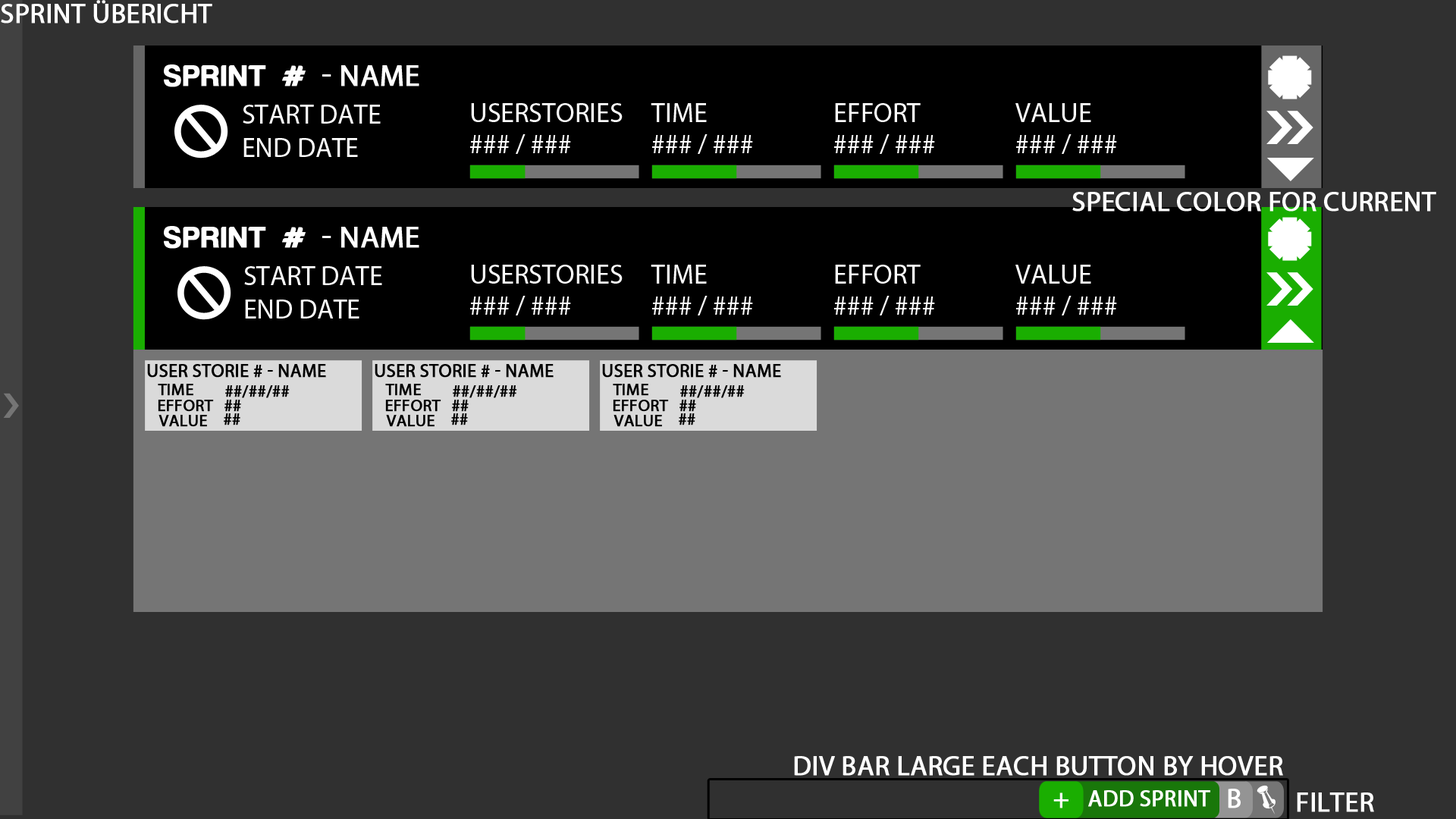
<style>
.page{position:relative;width:1456px;height:819px;background:#303030}
.page>*{position:absolute;margin:0}
.t1{font:27.3px "MyriadPro-Regular";color:#ffffff;text-transform:uppercase;font-weight:bold}
.t2{font:30.3px "HarabaraMaisBold-HarabaraMaisBold";color:#ffffff;text-transform:uppercase;font-weight:bold}
.t3{font:30.3px "MyriadPro-Regular";color:#ffffff;text-transform:uppercase;font-weight:bold}
.t4{font:27.3px/24.8px "MyriadPro-Regular";color:#ffffff;text-transform:uppercase}
.t5{font:27.3px "MyriadPro-Regular";color:#ffffff;text-transform:uppercase}
.t6{font:18.2px "MyriadPro-Regular";color:#000000;text-transform:uppercase;font-weight:bold}
.t7{font:16.7px "MyriadPro-Regular";color:#000000;text-transform:uppercase;font-weight:bold}
.t8{font:22.7px "MyriadPro-Regular";color:#ffffff;text-transform:uppercase;font-weight:bold}
</style>
<div class="page">
<p class="t1" style="left:1px;top:0px;width:211px;height:24px">Sprint übericht</p>
<p class="t2" style="left:164px;top:64px;width:255px;height:23px">Sprint # <span class="t3">- Name</span></p>
<p class="t4" style="left:243px;top:105px;width:138px;height:52px">start Date<br>End Date</p>
<p class="t5" style="left:471px;top:103px;width:152px;height:19px">UserStories</p>
<p class="t5" style="left:651px;top:103px;width:56px;height:19px">time</p>
<p class="t5" style="left:835px;top:103px;width:86px;height:19px">Effort</p>
<p class="t5" style="left:1015px;top:103px;width:76px;height:19px">Value</p>
<p class="t5" style="left:470px;top:134px;width:101px;height:20px">### / ###</p>
<p class="t5" style="left:652px;top:134px;width:101px;height:20px">### / ###</p>
<p class="t5" style="left:834px;top:134px;width:101px;height:20px">### / ###</p>
<p class="t5" style="left:1016px;top:134px;width:101px;height:20px">### / ###</p>
<p class="t1" style="left:1072px;top:192px;width:364px;height:20px">Special color for current</p>
<p class="t2" style="left:164px;top:226px;width:255px;height:23px">Sprint # <span class="t3">- Name</span></p>
<p class="t4" style="left:244px;top:266px;width:138px;height:52px">start Date<br>End Date</p>
<p class="t5" style="left:471px;top:265px;width:152px;height:19px">UserStories</p>
<p class="t5" style="left:651px;top:265px;width:56px;height:19px">time</p>
<p class="t5" style="left:835px;top:265px;width:86px;height:19px">Effort</p>
<p class="t5" style="left:1015px;top:265px;width:76px;height:19px">Value</p>
<p class="t5" style="left:470px;top:296px;width:101px;height:19px">### / ###</p>
<p class="t5" style="left:652px;top:296px;width:101px;height:19px">### / ###</p>
<p class="t5" style="left:834px;top:296px;width:101px;height:19px">### / ###</p>
<p class="t5" style="left:1016px;top:296px;width:101px;height:19px">### / ###</p>
<p class="t6" style="left:147px;top:364px;width:179px;height:14px">User sTorie # - name</p>
<p class="t6" style="left:375px;top:364px;width:179px;height:14px">User sTorie # - name</p>
<p class="t6" style="left:602px;top:364px;width:179px;height:14px">User sTorie # - name</p>
<p class="t7" style="left:158px;top:384px;width:35px;height:12px">Time</p>
<p class="t7" style="left:225px;top:385px;width:65px;height:13px">##/##/##</p>
<p class="t7" style="left:385px;top:384px;width:36px;height:12px">Time</p>
<p class="t7" style="left:453px;top:385px;width:64px;height:13px">##/##/##</p>
<p class="t7" style="left:613px;top:384px;width:35px;height:12px">Time</p>
<p class="t7" style="left:680px;top:385px;width:65px;height:13px">##/##/##</p>
<p class="t7" style="left:158px;top:400px;width:56px;height:12px">Effort</p>
<p class="t7" style="left:224px;top:400px;width:17px;height:12px">##</p>
<p class="t7" style="left:385px;top:400px;width:56px;height:12px">Effort</p>
<p class="t7" style="left:452px;top:400px;width:17px;height:12px">##</p>
<p class="t7" style="left:613px;top:400px;width:56px;height:12px">Effort</p>
<p class="t7" style="left:679px;top:400px;width:17px;height:12px">##</p>
<p class="t7" style="left:224px;top:413px;width:16px;height:12px">##</p>
<p class="t7" style="left:451px;top:413px;width:17px;height:12px">##</p>
<p class="t7" style="left:679px;top:413px;width:16px;height:12px">##</p>
<p class="t7" style="left:158px;top:415px;width:49px;height:12px">Value</p>
<p class="t7" style="left:386px;top:415px;width:49px;height:12px">Value</p>
<p class="t7" style="left:613px;top:415px;width:49px;height:12px">Value</p>
<p class="t1" style="left:794px;top:756px;width:489px;height:20px">DIV Bar large each button by hover</p>
<p class="t1" style="left:1053px;top:792px;width:15px;height:16px">+</p>
<p class="t8" style="left:1088px;top:790px;width:122px;height:17px">add Sprint</p>
<p class="t1" style="left:1228px;top:789px;width:13px;height:19px">B</p>
<p class="t1" style="left:1297px;top:792px;width:77px;height:20px">Filter</p>
</div>
